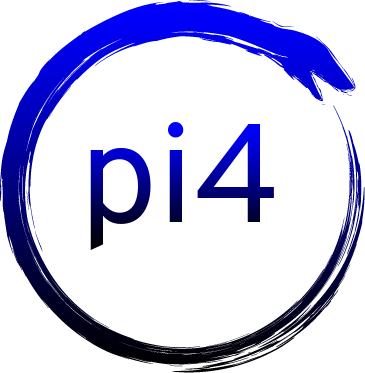
<style>
.page{position:relative;width:365px;height:373px;background:#ffffff}
.page>*{position:absolute;margin:0}
.t1{font:140px "Overpass-Regular"}
</style>
<div class="page">
<p class="t1" style="left:90px;top:122px;width:184px;height:128px">pi4</p>
</div>
